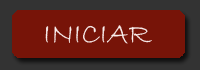
<style>
.page{position:relative;width:200px;height:70px;background:#771408}
.page>*{position:absolute;margin:0}
.t1{font:30px "BradleyHandITC";color:#f9efee}
</style>
<div class="page">
<p class="t1" style="left:45px;top:25px;width:107px;height:19px">INICIAR</p>
</div>
